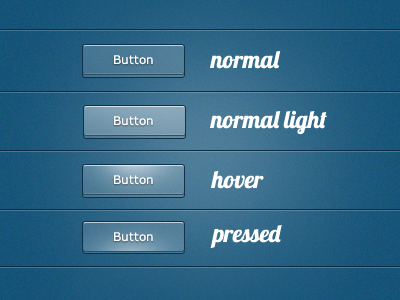
<style>
.page{position:relative;width:400px;height:300px}
.page>*{position:absolute;margin:0}
.t1{font:24px "Lobster1.4";color:#ffffff}
.t2{font:12px "Verdana";color:#ffffff}
</style>
<div class="page">
<p class="t1" style="left:210px;top:51px;width:71px;height:18px">normal</p>
<p class="t2" style="left:114px;top:55px;width:39px;height:10px">Button</p>
<p class="t1" style="left:210px;top:110px;width:117px;height:25px">normal light</p>
<p class="t2" style="left:114px;top:116px;width:39px;height:10px">Button</p>
<p class="t1" style="left:211px;top:171px;width:53px;height:18px">hover</p>
<p class="t2" style="left:114px;top:175px;width:39px;height:10px">Button</p>
<p class="t2" style="left:114px;top:232px;width:39px;height:10px">Button</p>
<p class="t1" style="left:210px;top:225px;width:72px;height:24px">pressed</p>
</div>
